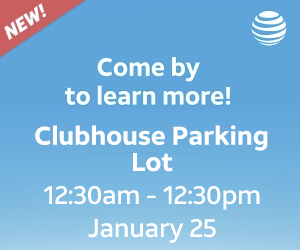
<style>
.page{position:relative;width:300px;height:250px;background:#60a5da}
.page>*{position:absolute;margin:0}
.t1{font:25.8px/19px "ATTAleckSans_Medium";letter-spacing:-0.01em;color:#ffffff}
.t2{font:25.8px/12px "ATTAleckSans_Bold";letter-spacing:-0.01em;color:#ffffff}
</style>
<div class="page">
<p class="t1" style="left:35px;top:125px;width:233px;height:118px;text-align:center"><span class="t2">Clubhouse Parking <br>Lot<br></span>12:30am - 12:30pm <br>January 25</p>
</div>
